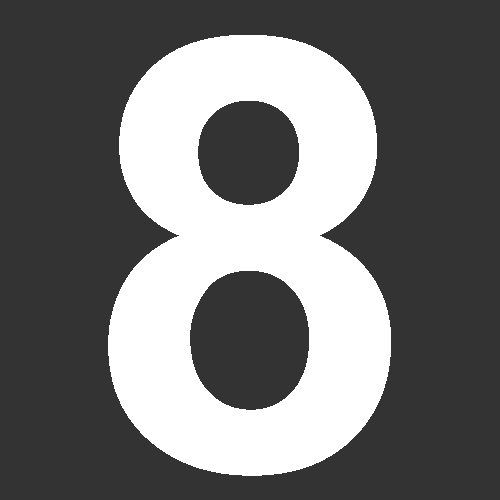
<style>
.page{position:relative;width:500px;height:500px;background:#333333}
.page>*{position:absolute;margin:0}
.t1{font:600px "Arial-BoldMT";color:#ffffff}
</style>
<div class="page">
<p class="t1" style="left:108px;top:35px;width:283px;height:441px">8</p>
</div>
